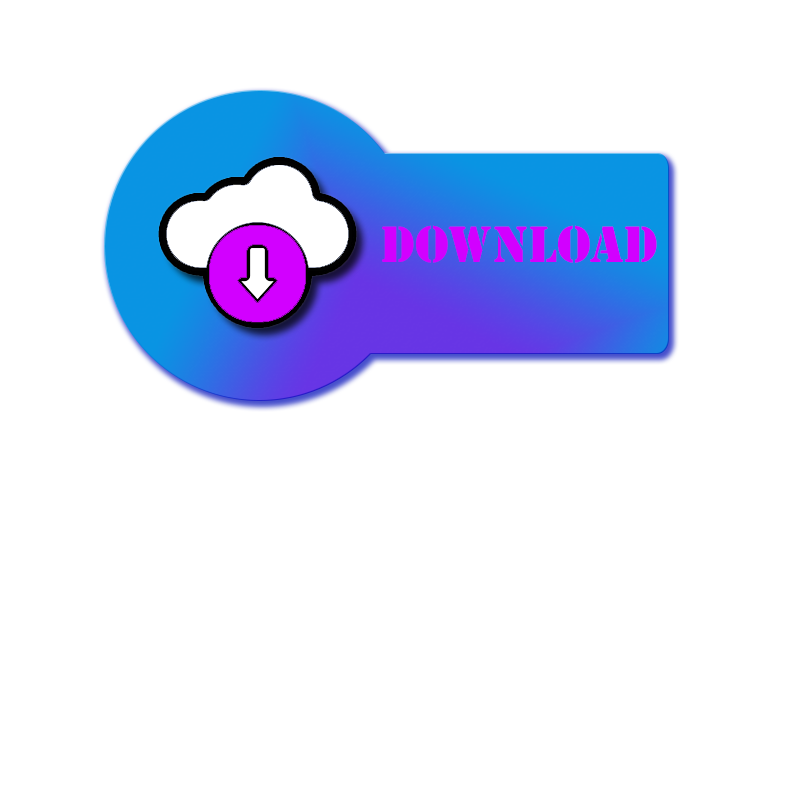
<style>
.page{position:relative;width:800px;height:800px;background:#ffffff}
.page>*{position:absolute;margin:0}
.t1{font:53.1px "Stencil";color:#d200ff}
</style>
<div class="page">
<p class="t1" style="left:382px;top:225px;width:275px;height:38px">Download</p>
</div>
